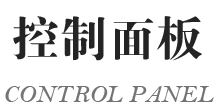
<style>
.page{position:relative;width:220px;height:110px;background:#ffffff}
.page>*{position:absolute;margin:0}
.t1{font:48px "FZDBSJW--GB1-0";color:#252424}
.t2{font:25px "BellMTItalic";color:#747373}
</style>
<div class="page">
<p class="t1" style="left:13px;top:16px;width:189px;height:45px">控制面板</p>
<p class="t2" style="left:5px;top:86px;width:209px;height:16px">CONTROL PANEL</p>
</div>
